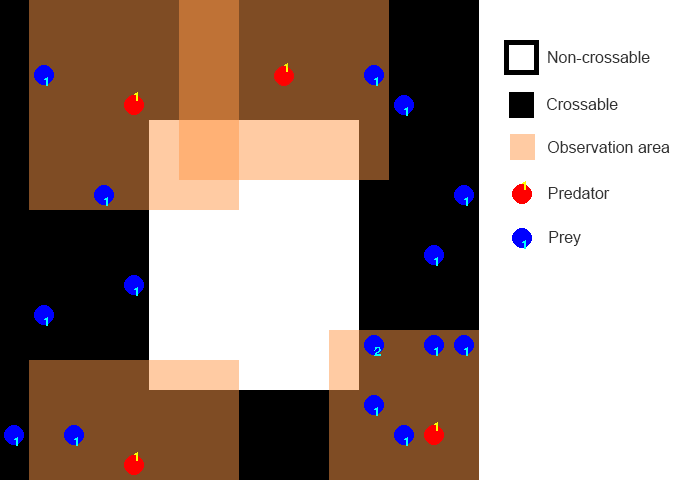
<style>
.page{position:relative;width:677px;height:480px;background:#ffffff}
.page>*{position:absolute;margin:0}
.t1{font:16px "ArialMT";color:#333333}
</style>
<div class="page">
<p class="t1" style="left:548px;top:51px;width:102px;height:12px">Non-crossable</p>
<p class="t1" style="left:547px;top:98px;width:71px;height:12px">Crossable</p>
<p class="t1" style="left:548px;top:141px;width:122px;height:12px">Observation area</p>
<p class="t1" style="left:548px;top:187px;width:62px;height:12px">Predator</p>
<p class="t1" style="left:549px;top:231px;width:32px;height:15px">Prey</p>
</div>
